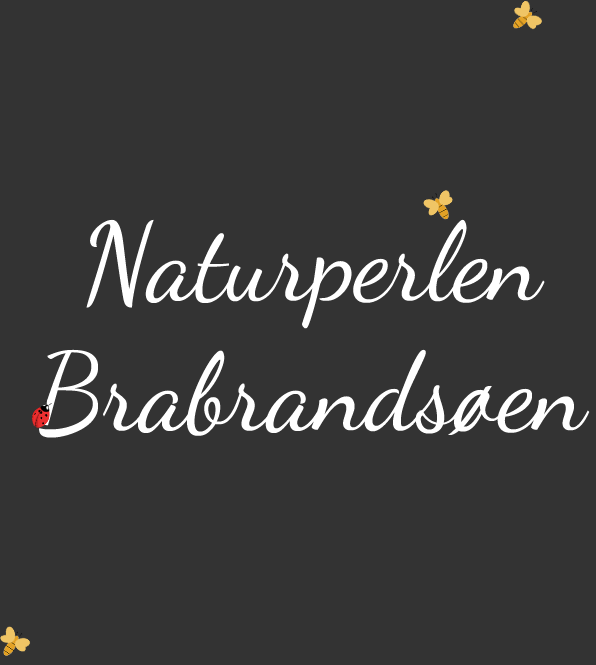
<style>
.page{position:relative;width:596px;height:665px;background:#333333}
.page>*{position:absolute;margin:0}
.t1{font:108.3px "DancingScript";color:#ffffff}
</style>
<div class="page">
<p class="t1" style="left:39px;top:219px;width:551px;height:219px;text-align:center">Naturperlen<br>Brabrandsøen</p>
</div>
